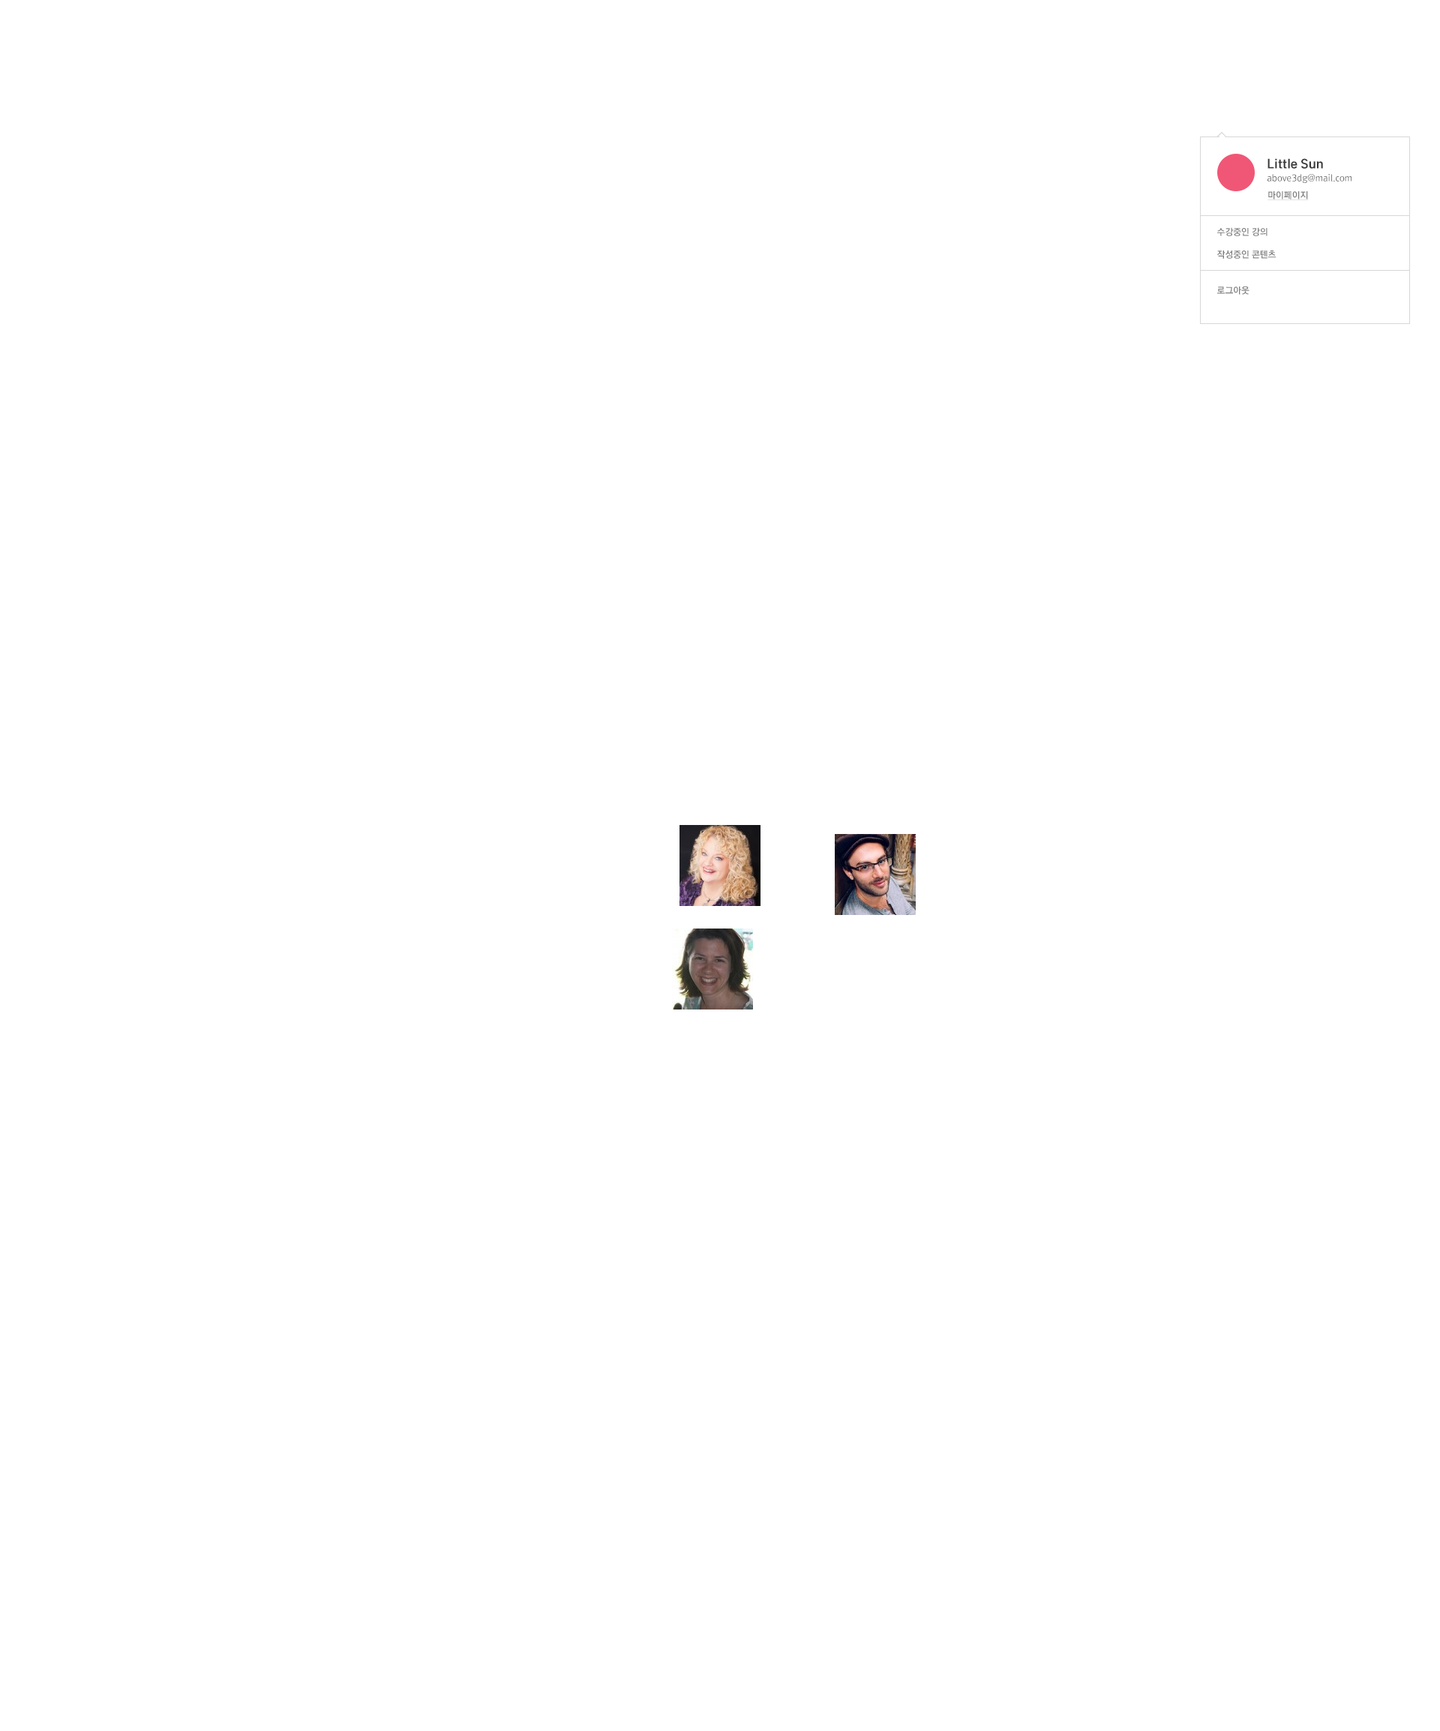
<style>
.page{position:relative;width:1440px;height:1731px;background:#ffffff}
.page>*{position:absolute;margin:0}
.t1{font:12px "RixHeadB";color:#393939}
.t2{font:9px "RixGoL"}
.t3{font:9px "RixGoB";color:#7d7d7d;text-decoration:underline}
.t4{font:9px/22.5px "RixGoB";color:#7d7d7d}
.t5{font:9px "RixGoB";color:#7d7d7d}
</style>
<div class="page">
<p class="t1" style="left:1268px;top:158px;width:55px;height:11px">Little Sun</p>
<p class="t2" style="left:1268px;top:174px;width:84px;height:9px">above3dg@mail.com</p>
<p class="t3" style="left:1268px;top:191px;width:41px;height:9px">마이페이지</p>
<p class="t4" style="left:1217px;top:227px;width:59px;height:32px">수강중인 강의<br>작성중인 콘텐츠</p>
<p class="t5" style="left:1217px;top:286px;width:33px;height:9px">로그아웃</p>
</div>
